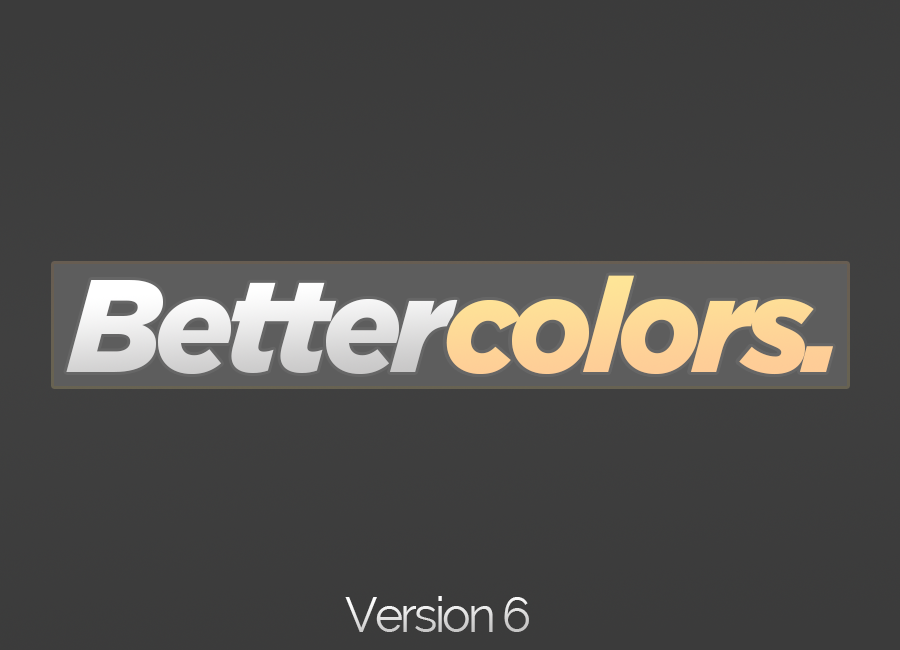
<style>
.page{position:relative;width:900px;height:650px}
.page>*{position:absolute;margin:0}
.t1{font:131.9px "Gotham-BlackItalic";letter-spacing:-0.06em}
.t2{font:131.9px "Gotham-BlackItalic";letter-spacing:-0.06em;color:#fee597}
.t3{font:48px "Raleway";letter-spacing:-0.06em;color:#dfdfdf}
</style>
<div class="page">
<p class="t1" style="left:66px;top:275px;width:747px;height:100px">Bettercolors</p>
<p class="t2" style="left:446px;top:275px;width:387px;height:100px">colors.</p>
<p class="t3" style="left:345px;top:596px;width:184px;height:36px">Version 6</p>
</div>
